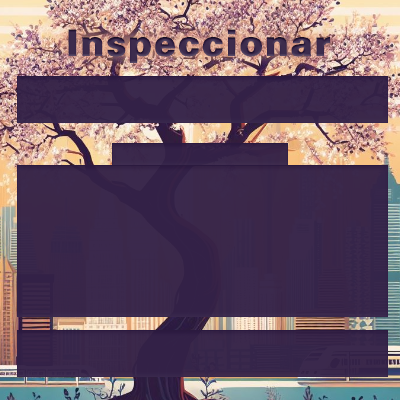
<style>
.page{position:relative;width:400px;height:400px}
.page>*{position:absolute;margin:0}
.t1{font:36px "Univers-Black";letter-spacing:0.05em;color:#2e1c40}
</style>
<div class="page">
<p class="t1" style="left:68px;top:29px;width:263px;height:34px">Inspeccionar</p>
</div>
